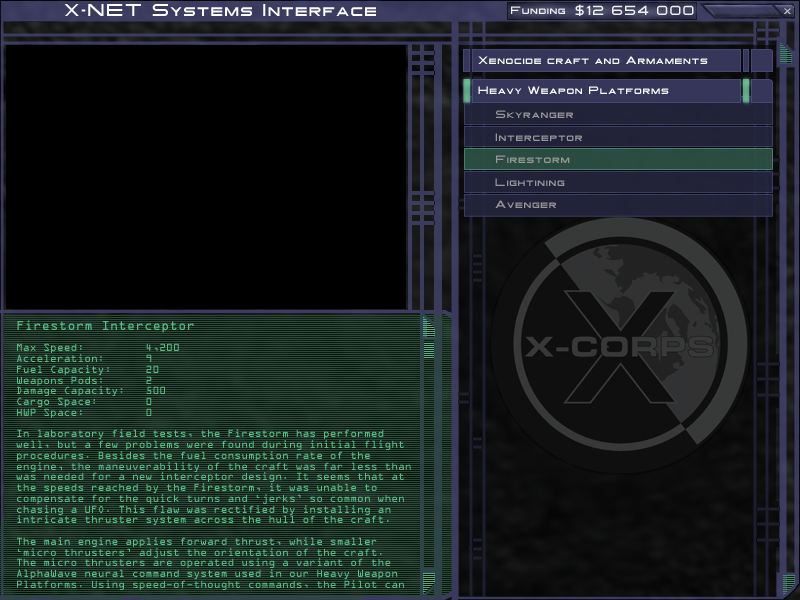
<style>
.page{position:relative;width:800px;height:600px;background:#000000}
.page>*{position:absolute;margin:0}
.t1{font:18px "Gotthard";letter-spacing:0.01em;color:#ffffff}
.t2{font:11.1px "Gotthard";color:#efefef}
.t3{font:13.9px "Gotthard";color:#efefef}
.t4{font:11.1px "Gotthard";letter-spacing:0.01em;color:#ffffff}
.t5{font:11.1px "Gotthard";letter-spacing:0.01em;color:#989898}
.t6{font:11.1px/10.7px "OCRAExtended";letter-spacing:0.01em;color:#57be85}
.t7{font:13.9px/10.7px "OCRAExtended";letter-spacing:0.01em;color:#57be85}
</style>
<div class="page">
<p class="t1" style="left:64px;top:4px;width:312px;height:12px">X-NET Systems Interface</p>
<p class="t2" style="left:511px;top:6px;width:54px;height:8px">Funding</p>
<p class="t3" style="left:575px;top:4px;width:119px;height:12px">$12 654 000</p>
<p class="t4" style="left:478px;top:56px;width:230px;height:8px">Xenocide craft and Armaments</p>
<p class="t4" style="left:478px;top:86px;width:191px;height:8px">Heavy Weapon Platforms</p>
<p class="t5" style="left:496px;top:110px;width:77px;height:8px">Skyranger</p>
<p class="t5" style="left:495px;top:133px;width:87px;height:8px">Interceptor</p>
<p class="t5" style="left:496px;top:155px;width:74px;height:8px">Firestorm</p>
<p class="t5" style="left:495px;top:178px;width:70px;height:8px">Lightining</p>
<p class="t5" style="left:495px;top:200px;width:61px;height:8px">Avenger</p>
<p class="t6" style="left:16px;top:320px;width:395px;height:270px"><span class="t7">Firestorm Interceptor<br><br></span>Max Speed:         4,200<br>Acceleration:      9<br>Fuel Capacity:     20<br>Weapons Pods:      2<br>Damage Capacity:   500<br>Cargo Space:       0<br>HWP Space:         0<br><br>In laboratory field tests, the Firestorm has performed<br>well, but a few problems were found during initial flight<br>procedures. Besides the fuel consumption rate of the<br>engine, the maneuverability of the craft was far less than<br>was needed for a new interceptor design. It seems that at<br>the speeds reached by the Firestorm, it was unable to<br>compensate for the quick turns and ‘jerks’ so common when<br>chasing a UFO. This flaw was rectified by installing an <br>intricate thruster system across the hull of the craft. <br><br>The main engine applies forward thrust, while smaller <br>‘micro thrusters’ adjust the orientation of the craft. <br>The micro thrusters are operated using a variant of the <br>AlphaWave neural command system used in our Heavy Weapon <br>Platforms. Using speed-of-thought commands, the Pilot can</p>
</div>
